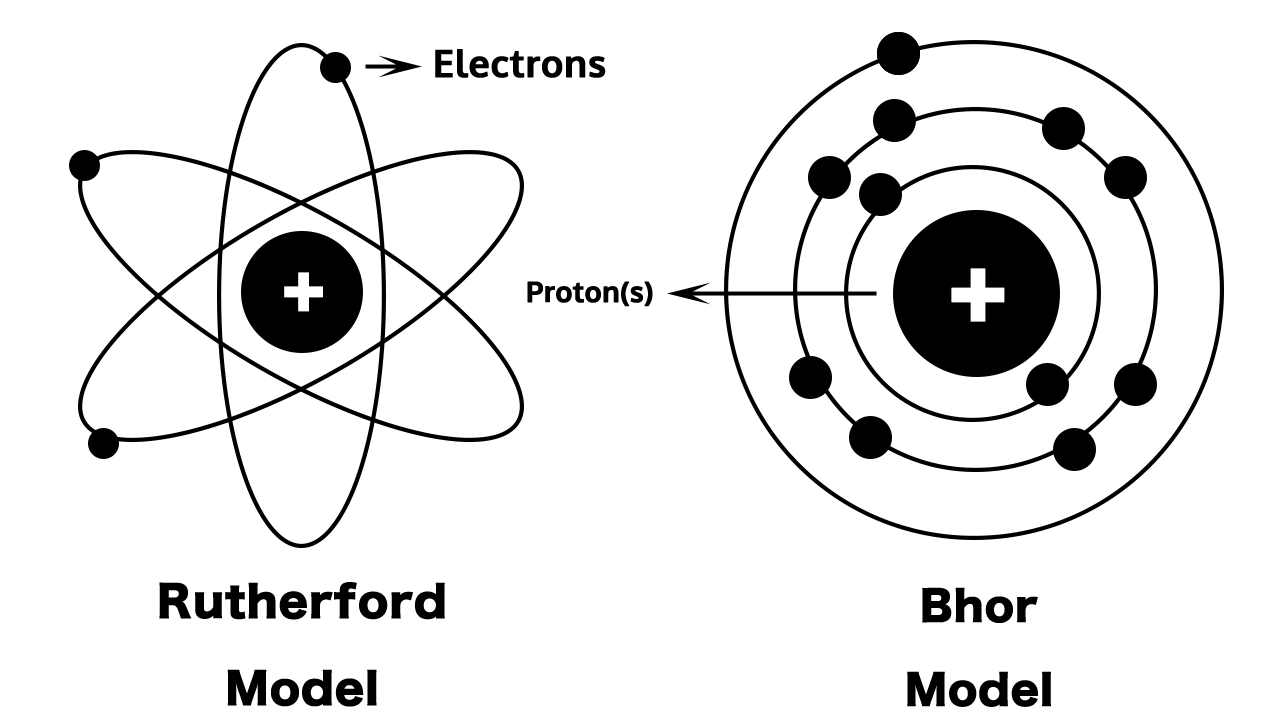
<style>
.page{position:relative;width:1286px;height:728px;background:#ffffff}
.page>*{position:absolute;margin:0}
.t1{font:37.3px "Oxygen-Bold";color:#000000;font-weight:bold}
.t2{font:83.2px "HiraginoSans-W8";color:#ffffff;font-weight:bold}
.t3{font:60.8px "HiraginoSans-W8";color:#ffffff;font-weight:bold}
.t4{font:28px "Oxygen-Bold";color:#000000;font-weight:bold}
.t5{font:42.4px/87.1px "HiraginoSans-W8";color:#000000;font-weight:bold}
.t6{font:40.7px/83.8px "HiraginoSans-W8";color:#000000;font-weight:bold}
</style>
<div class="page">
<p class="t1" style="left:435px;top:49px;width:171px;height:29px">Electrons</p>
<p class="t2" style="left:951px;top:268px;width:54px;height:54px">+</p>
<p class="t3" style="left:284px;top:272px;width:39px;height:40px">+</p>
<p class="t4" style="left:527px;top:281px;width:126px;height:26px">Proton(s)</p>
<p class="t5" style="left:159px;top:582px;width:286px;height:125px;text-align:center">Rutherford<br>Model</p>
<p class="t6" style="left:907px;top:587px;width:144px;height:120px;text-align:center">Bhor<br>Model</p>
</div>
